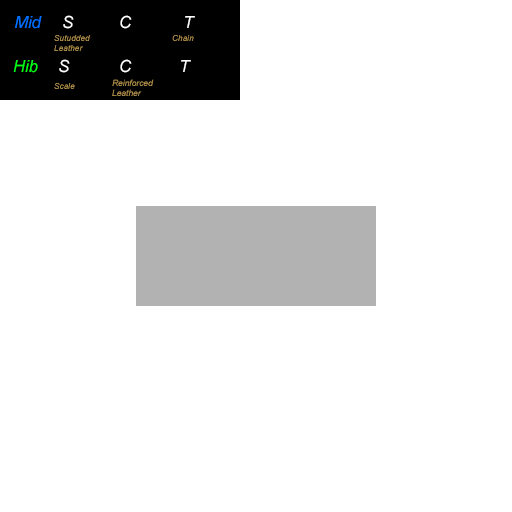
<style>
.page{position:relative;width:512px;height:512px;background:#ffffff}
.page>*{position:absolute;margin:0}
.t1{font:16.7px "Arial-ItalicMT";color:#0071ff}
.t2{font:16.7px "Arial-ItalicMT";color:#ffffff}
.t3{font:8.3px "Arial-ItalicMT";color:#be9b53}
.t4{font:8.3px "Arial-ItalicMT"}
.t5{font:16.7px "Arial-ItalicMT";color:#00ff18}
.t6{font:8.5px "Arial-ItalicMT";color:#be9b53}
</style>
<div class="page">
<p class="t1" style="left:15px;top:16px;width:27px;height:13px">Mid</p>
<p class="t2" style="left:63px;top:15px;width:11px;height:14px">S</p>
<p class="t2" style="left:120px;top:15px;width:12px;height:14px">C</p>
<p class="t2" style="left:185px;top:16px;width:10px;height:12px">T</p>
<p class="t3" style="left:54px;top:35px;width:36px;height:16px">Sutudded<br>Leather</p>
<p class="t4" style="left:172px;top:35px;width:22px;height:6px">Chain</p>
<p class="t5" style="left:13px;top:60px;width:25px;height:13px">Hib</p>
<p class="t2" style="left:59px;top:59px;width:11px;height:14px">S</p>
<p class="t2" style="left:120px;top:59px;width:12px;height:14px">C</p>
<p class="t2" style="left:181px;top:60px;width:10px;height:12px">T</p>
<p class="t3" style="left:54px;top:83px;width:21px;height:6px">Scale</p>
<p class="t6" style="left:112px;top:79px;width:42px;height:17px">Reinforced<br>Leather</p>
</div>
